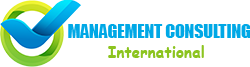
<style>
.page{position:relative;width:250px;height:67px;background:#ffffff}
.page>*{position:absolute;margin:0}
.t1{font:17.7px "Impact";color:#00a8e6;text-transform:uppercase}
.t2{font:15.5px "ComicSansMS-Bold";color:#8cc41f}
</style>
<div class="page">
<p class="t1" style="left:68px;top:24px;width:183px;height:14px">Management Consulting</p>
<p class="t2" style="left:108px;top:45px;width:96px;height:13px">International</p>
</div>
